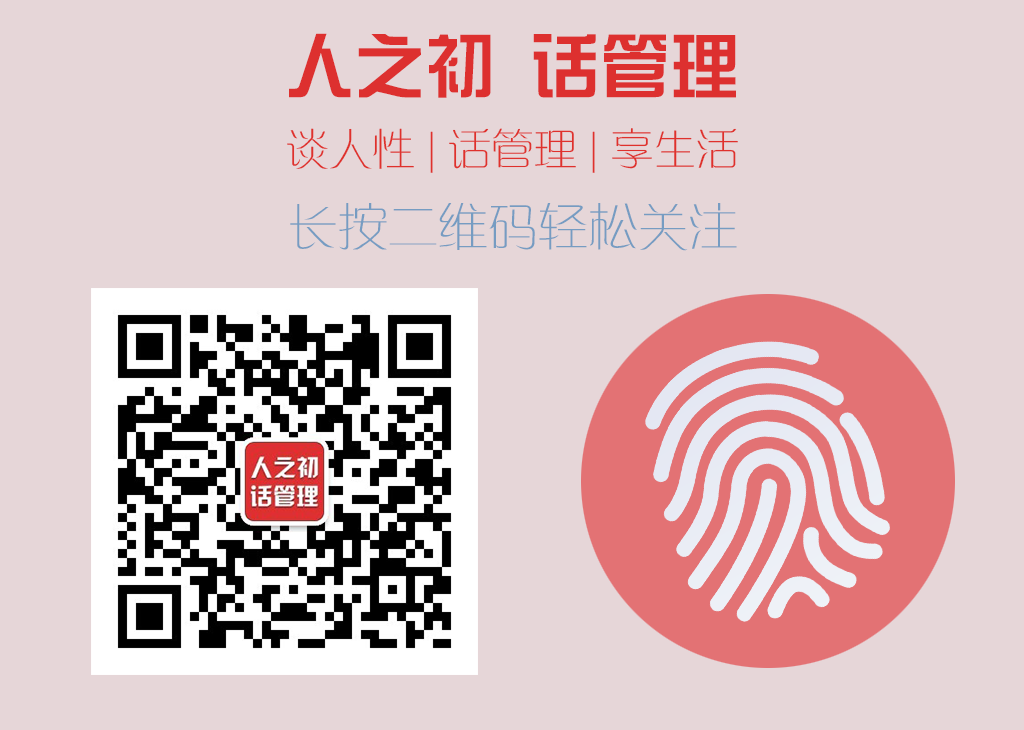
<style>
.page{position:relative;width:1024px;height:730px;background:#e6d6d8}
.page>*{position:absolute;margin:0}
.t1{font:70px "HYk1gj";color:#dd302f}
.t2{font:43px "FZXQJW--GB1-0";color:#df312c}
.t3{font:50px "FZXQJW--GB1-0";color:#769cc2}
</style>
<div class="page">
<p class="t1" style="left:289px;top:33px;width:447px;height:65px">人之初 话管理</p>
<p class="t2" style="left:287px;top:128px;width:451px;height:45px">谈人性 | 话管理 | 享生活</p>
<p class="t3" style="left:290px;top:203px;width:447px;height:48px">长按二维码轻松关注</p>
</div>
